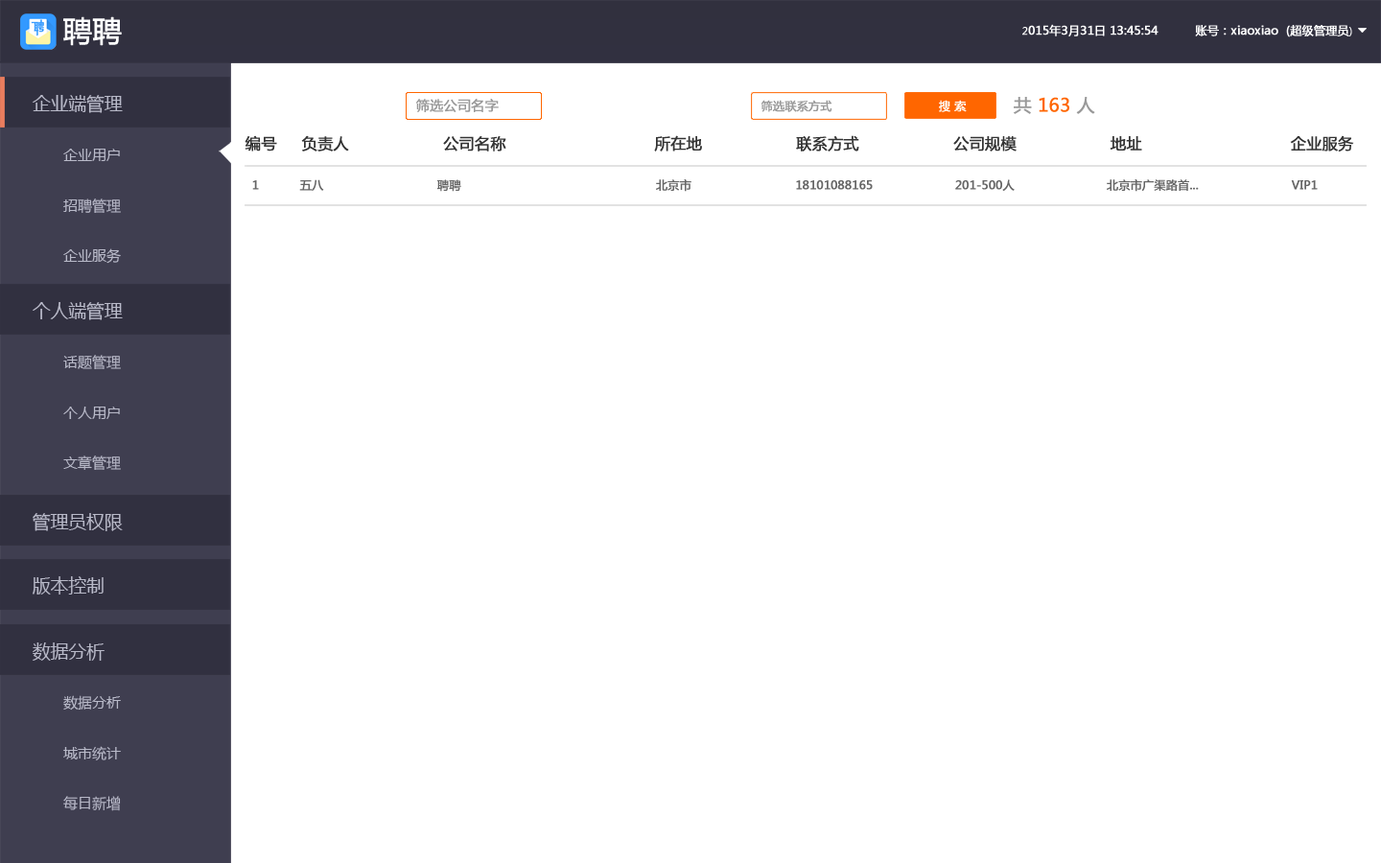
<style>
.page{position:relative;width:1381px;height:863px;background:#ffffff}
.page>*{position:absolute;margin:0}
.t1{font:28.8px "MicrosoftYaHei";color:#ffffff;font-weight:bold}
.t2{font:11.5px "MicrosoftYaHei";color:#ffffff;font-weight:bold}
.t3{font:10.1px "MicrosoftYaHei";color:#ffffff;font-weight:bold}
.t4{font:18px "MicrosoftYaHei";color:#b9bac9}
.t5{font:13.4px "MicrosoftYaHei";color:#999999;font-weight:bold}
.t6{font:11.5px "MicrosoftYaHei";color:#999999;font-weight:bold}
.t7{font:11.5px "MicrosoftYaHei";color:#fefefe;font-weight:bold}
.t8{font:18px "MicrosoftYaHei";color:#ff6600;font-weight:bold}
.t9{font:18px "MicrosoftYaHei";color:#999999;font-weight:bold}
.t10{font:15.3px "MicrosoftYaHei";color:#333333;font-weight:bold}
.t11{font:14.4px/50.4px "MicrosoftYaHei";color:#b9bac9}
.t12{font:11.5px "MicrosoftYaHei";color:#666666;font-weight:bold}
</style>
<div class="page">
<p class="t1" style="left:63px;top:16px;width:59px;height:30px">聘聘</p>
<p class="t2" style="left:1023px;top:24px;width:329px;height:13px"><span class="t3">2</span>015年3月31日 13:45:54          账号：xiaoxiao  (超级管理员<span class="t3">)</span></p>
<p class="t4" style="left:32px;top:95px;width:91px;height:18px">企业端管理</p>
<p class="t5" style="left:415px;top:99px;width:84px;height:13px">筛选公司名字</p>
<p class="t6" style="left:761px;top:100px;width:72px;height:12px">筛选联系方式</p>
<p class="t7" style="left:939px;top:100px;width:28px;height:12px">搜 索</p>
<p class="t8" style="left:1014px;top:97px;width:81px;height:17px"><span class="t9">共 </span>163 <span class="t9">人</span></p>
<p class="t10" style="left:245px;top:135px;width:1109px;height:17px">编号     负责人                   公司名称                              所在地                   联系方式                   公司规模                   地址                              企业服务</p>
<p class="t11" style="left:63px;top:149px;width:58px;height:115px">企业用户<br>招聘管理<br>企业服务</p>
<p class="t12" style="left:252px;top:179px;width:1066px;height:13px">1           五八                              聘聘                                               北京市                            18101088165                       201-500人                      北京市广渠路首...                         VIP1</p>
<p class="t4" style="left:33px;top:302px;width:90px;height:18px">个人端管理</p>
<p class="t11" style="left:63px;top:355px;width:58px;height:115px">话题管理<br>个人用户<br>文章管理</p>
<p class="t4" style="left:33px;top:513px;width:90px;height:18px">管理员权限</p>
<p class="t4" style="left:33px;top:576px;width:71px;height:19px">版本控制</p>
<p class="t4" style="left:33px;top:643px;width:72px;height:18px">数据分析</p>
<p class="t11" style="left:63px;top:695px;width:58px;height:116px">数据分析<br>城市统计<br>每日新增</p>
</div>
